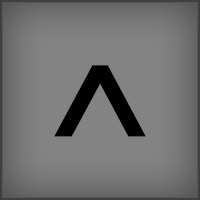
<style>
.page{position:relative;width:200px;height:200px;background:#838383}
.page>*{position:absolute;margin:0}
.t1{font:232px "DINPro";color:#000000;text-transform:uppercase}
</style>
<div class="page">
<p class="t1" style="left:54px;top:65px;width:92px;height:72px">^</p>
</div>
